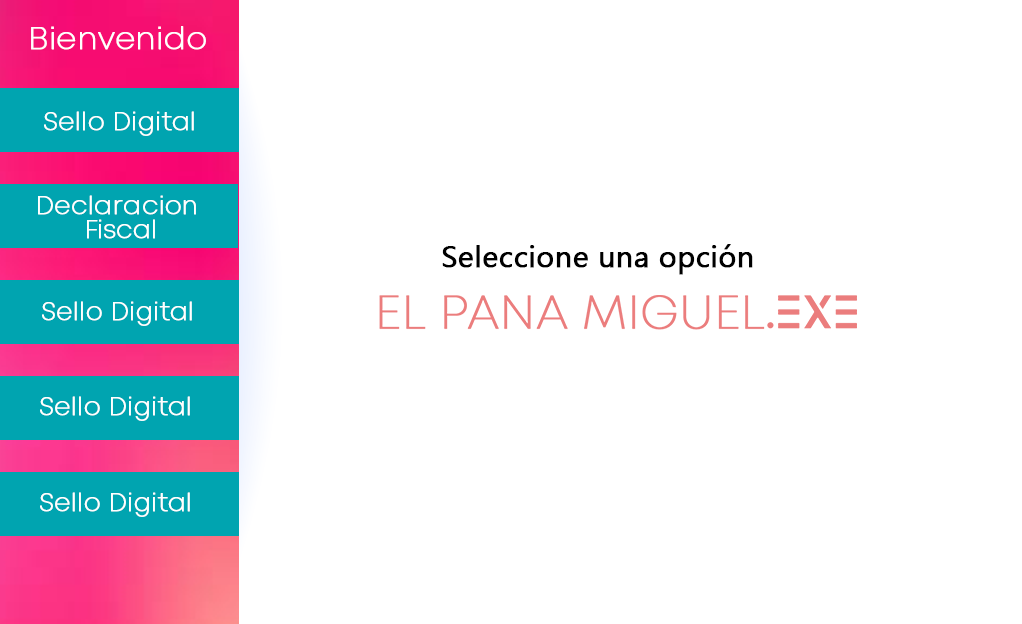
<style>
.page{position:relative;width:1022px;height:624px;background:#ffffff}
.page>*{position:absolute;margin:0}
.t1{font:30.4px "Mont-ExtraLightDEMO";color:#ffffff;font-weight:bold}
.t2{font:24.9px "Mont-ExtraLightDEMO";color:#ffffff;font-weight:bold}
.t3{font:24.9px/24px "Mont-ExtraLightDEMO";color:#ffffff;font-weight:bold}
.t4{font:30px "Ebrima";color:#000000;font-weight:bold}
</style>
<div class="page">
<p class="t1" style="left:31px;top:26px;width:175px;height:24px">Bienvenido</p>
<p class="t2" style="left:44px;top:111px;width:150px;height:25px">Sello Digital</p>
<p class="t3" style="left:38px;top:195px;width:158px;height:44px;text-align:center">Declaracion <br>Fiscal</p>
<p class="t4" style="left:442px;top:244px;width:311px;height:31px">Seleccione una opción</p>
<p class="t2" style="left:42px;top:301px;width:150px;height:25px">Sello Digital</p>
<p class="t2" style="left:40px;top:396px;width:150px;height:25px">Sello Digital</p>
<p class="t2" style="left:40px;top:492px;width:150px;height:25px">Sello Digital</p>
</div>
